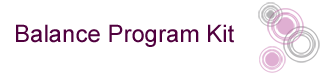
<style>
.page{position:relative;width:331px;height:77px;background:#ffffff}
.page>*{position:absolute;margin:0}
.t1{font:24px "ArialMT";color:#50003e}
</style>
<div class="page">
<p class="t1" style="left:16px;top:24px;width:218px;height:23px">Balance Program Kit</p>
</div>
